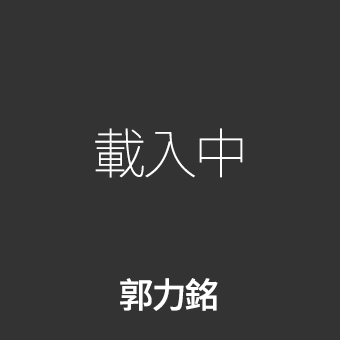
<style>
.page{position:relative;width:340px;height:340px;background:#333333}
.page>*{position:absolute;margin:0}
.t1{font:54px "SourceHanSansTC-ExtraLight";letter-spacing:-0.055em;color:#ffffff}
.t2{font:35px "SourceHanSansTC-Medium";letter-spacing:-0.055em;color:#ffffff}
</style>
<div class="page">
<p class="t1" style="left:95px;top:128px;width:148px;height:50px">載入中</p>
<p class="t2" style="left:120px;top:278px;width:98px;height:33px">郭力銘</p>
</div>
